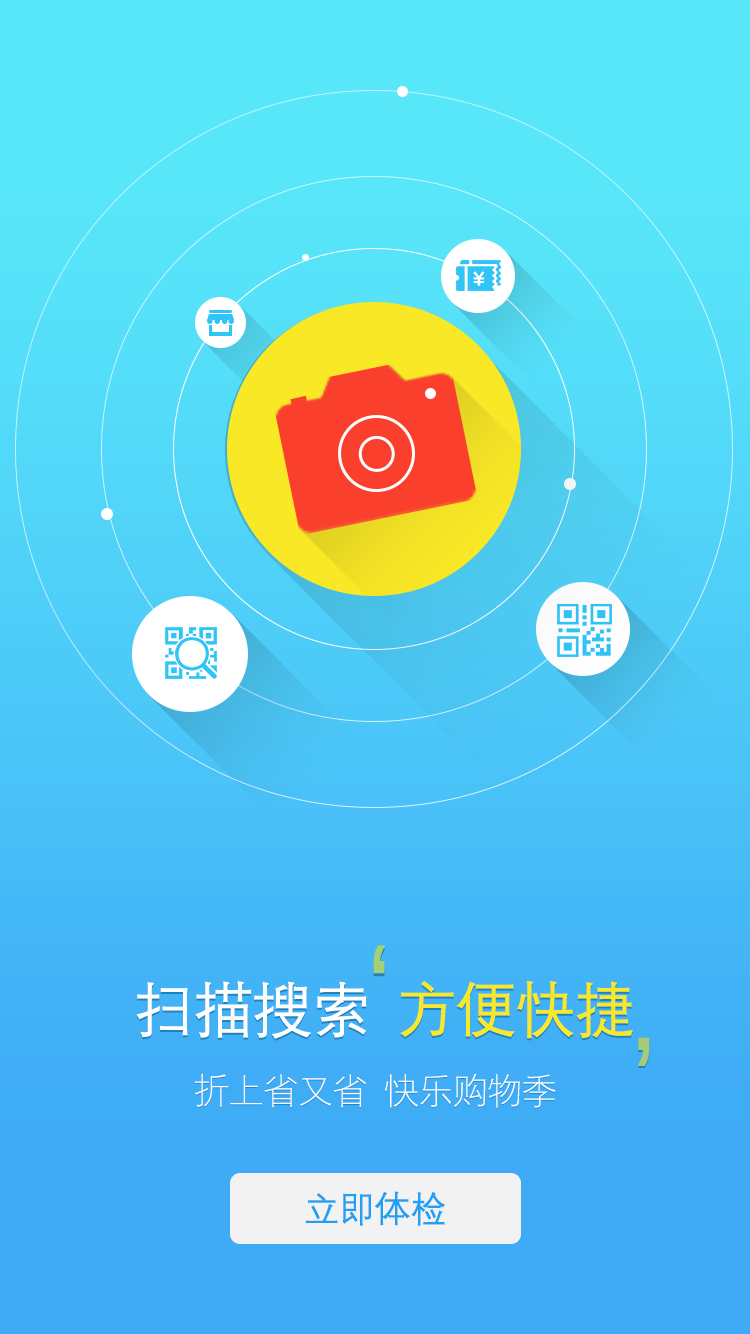
<style>
.page{position:relative;width:750px;height:1334px}
.page>*{position:absolute;margin:0}
.t1{font:140px "DengXian-Regular";letter-spacing:-0.04em;color:#a6d076;font-weight:bold}
.t2{font:60px "DengXian-Regular";letter-spacing:-0.04em;font-weight:bold}
.t3{font:60px "DengXian-Regular";letter-spacing:-0.04em;color:#ffffff;font-weight:bold}
.t4{font:60px "DengXian-Regular";letter-spacing:-0.04em;color:#f9e826;font-weight:bold}
.t5{font:140.4px "DengXian-Regular";letter-spacing:-0.04em;color:#a5cd77;font-weight:bold}
.t6{font:36px "DengXian-Light";letter-spacing:-0.04em;color:#ffffff}
.t7{font:36px "DengXian-Light";letter-spacing:-0.04em}
.t8{font:36px "DengXian-Regular";letter-spacing:-0.04em;color:#209ff5;font-weight:bold}
</style>
<div class="page">
<p class="t1" style="left:373px;top:948px;width:12px;height:29px">‘</p>
<p class="t1" style="left:373px;top:945px;width:12px;height:29px">‘</p>
<p class="t2" style="left:136px;top:983px;width:231px;height:58px">扫描搜索</p>
<p class="t3" style="left:136px;top:981px;width:231px;height:58px">扫描搜索</p>
<p class="t2" style="left:400px;top:983px;width:233px;height:58px">方便快捷</p>
<p class="t4" style="left:400px;top:981px;width:233px;height:58px">方便快捷</p>
<p class="t5" style="left:638px;top:1037px;width:12px;height:29px;rotate:180deg">‘</p>
<p class="t5" style="left:638px;top:1039px;width:12px;height:29px;rotate:180deg">‘</p>
<p class="t6" style="left:195px;top:1073px;width:361px;height:35px">折上省又省  快乐购物季</p>
<p class="t7" style="left:195px;top:1074px;width:361px;height:35px">折上省又省  快乐购物季</p>
<p class="t8" style="left:305px;top:1191px;width:140px;height:35px">立即体检</p>
</div>
